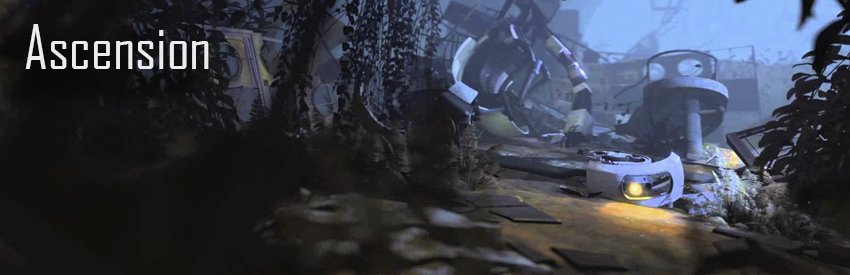
<style>
.page{position:relative;width:850px;height:275px}
.page>*{position:absolute;margin:0}
.t1{font:59.2px "AgencyFB-Reg";color:#ececec}
</style>
<div class="page">
<p class="t1" style="left:25px;top:24px;width:184px;height:45px">Ascension</p>
</div>
